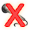
<style>
.page{position:relative;width:30px;height:30px}
.page>*{position:absolute;margin:0}
.t1{font:30px "ArialMT";color:#f94848}
</style>
<div class="page">
<p class="t1" style="left:5px;top:4px;width:20px;height:22px">X</p>
</div>
